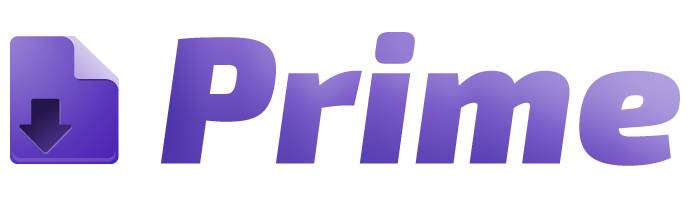
<style>
.page{position:relative;width:700px;height:200px;background:#ffffff}
.page>*{position:absolute;margin:0}
.t1{font:180px "Exo2.0-BlackItalic";letter-spacing:0.01em;color:#7a5dc8}
</style>
<div class="page">
<p class="t1" style="left:161px;top:32px;width:519px;height:134px">Prime</p>
</div>
